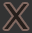
<style>
.page{position:relative;width:32px;height:33px;background:#333333}
.page>*{position:absolute;margin:0}
.t1{font:40px "LucidaConsole";color:#261f1b}
</style>
<div class="page">
<p class="t1" style="left:4px;top:4px;width:24px;height:25px">X</p>
</div>
